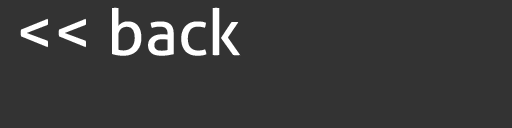
<style>
.page{position:relative;width:512px;height:128px;background:#333333}
.page>*{position:absolute;margin:0}
.t1{font:64px "Aller-Regular";color:#ffffff}
</style>
<div class="page">
<p class="t1" style="left:20px;top:7px;width:221px;height:49px">&lt;&lt; back</p>
</div>
